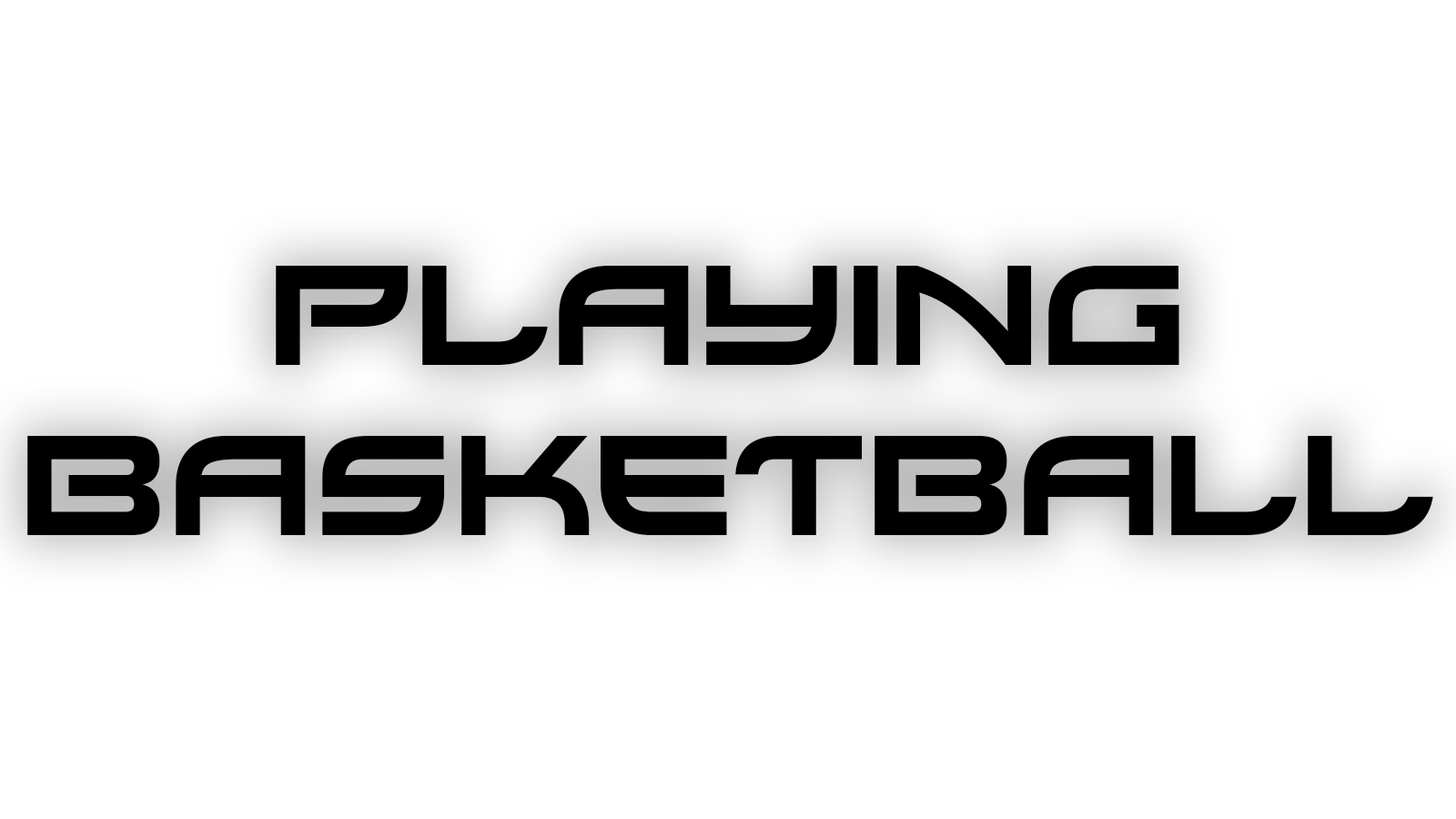
<style>
.page{position:relative;width:1456px;height:819px;background:#ffffff}
.page>*{position:absolute;margin:0}
.t1{font:141.6px "Xirod-Regular";color:#000000}
</style>
<div class="page">
<p class="t1" style="left:27px;top:266px;width:1406px;height:269px;text-align:center">playing<br>basketball</p>
</div>
